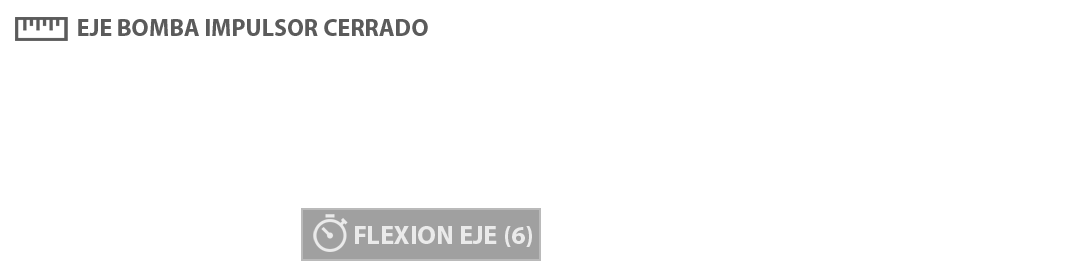
<style>
.page{position:relative;width:1067px;height:274px;background:#ffffff}
.page>*{position:absolute;margin:0}
.t1{font:24px "MyriadPro-Bold";color:#5b5b5b}
.t2{font:26px "MyriadPro-Bold";color:#eaeaea}
</style>
<div class="page">
<p class="t1" style="left:78px;top:19px;width:350px;height:17px">EJE BOMBA IMPULSOR CERRADO</p>
<p class="t2" style="left:355px;top:226px;width:177px;height:21px">FLEXION EJE (6)</p>
</div>
